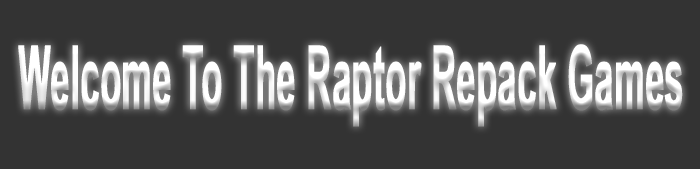
<style>
.page{position:relative;width:700px;height:169px;background:#333333}
.page>*{position:absolute;margin:0}
.t1{font:87.5px "Arial-BoldMT";color:#ffffff;font-weight:bold;scale:0.39 1}
</style>
<div class="page">
<p class="t1" style="left:18px;top:44px;width:665px;height:83px">Welcome To The Raptor Repack Games</p>
</div>
